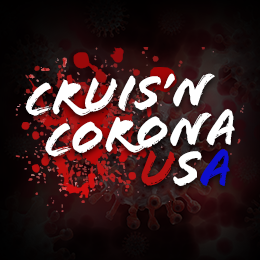
<style>
.page{position:relative;width:260px;height:260px}
.page>*{position:absolute;margin:0}
.t1{font:51.2px "FloodStd";color:#ffffff}
.t2{font:53px "FloodStd";color:#b41111}
.t3{font:53px "FloodStd";color:#ffffff}
.t4{font:53px "FloodStd";color:#0e0ecd}
</style>
<div class="page">
<p class="t1" style="left:25px;top:73px;width:190px;height:43px;rotate:-3deg">Cruis’n</p>
<p class="t1" style="left:45px;top:109px;width:190px;height:48px;rotate:-5deg">Corona</p>
<p class="t2" style="left:141px;top:148px;width:89px;height:38px;rotate:-2deg">U<span class="t3">S</span><span class="t4">A</span></p>
</div>
